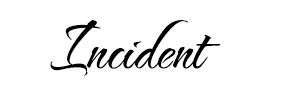
<style>
.page{position:relative;width:300px;height:100px;background:#ffffff}
.page>*{position:absolute;margin:0}
.t1{font:72px "TheNautiGalROB";color:#000000}
</style>
<div class="page">
<p class="t1" style="left:50px;top:20px;width:171px;height:57px">Incident</p>
</div>
